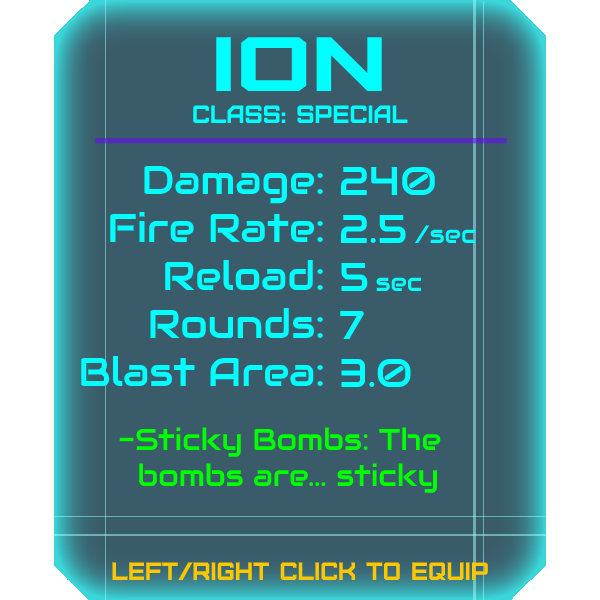
<style>
.page{position:relative;width:600px;height:600px;background:#3a5c6a}
.page>*{position:absolute;margin:0}
.t1{font:76.8px "Furore";color:#00ffff;scale:1.35 1}
.t2{font:25px "Furore";color:#00ffff}
.t3{font:40px "Audiowide-Regular";color:#00ffff}
.t4{font:25px "Audiowide-Regular";color:#00ffff}
.t5{font:30px "Audiowide-Regular";color:#00ff00}
.t6{font:40px "Audiowide-Regular";color:#00ff00}
.t7{font:25px "Furore";color:#ffc700}
</style>
<div class="page">
<p class="t1" style="left:216px;top:37px;width:166px;height:54px">Ion</p>
<p class="t2" style="left:193px;top:105px;width:215px;height:18px">Class: Special</p>
<p class="t3" style="left:81px;top:165px;width:242px;height:221px;text-align:right">Damage:<br>Fire Rate:<br>Reload:<br>Rounds:<br>Blast Area:</p>
<p class="t3" style="left:340px;top:166px;width:136px;height:221px">240<br>2.5 <span class="t4">/sec<br></span>5 <span class="t4">sec<br></span>7<br>3.0</p>
<p class="t5" style="left:119px;top:427px;width:322px;height:66px"><span class="t6"><br><br><br><br><br><br></span>-Sticky Bombs: The<br>  bombs are... sticky</p>
<p class="t7" style="left:112px;top:562px;width:376px;height:18px">left/right click to equip</p>
</div>
